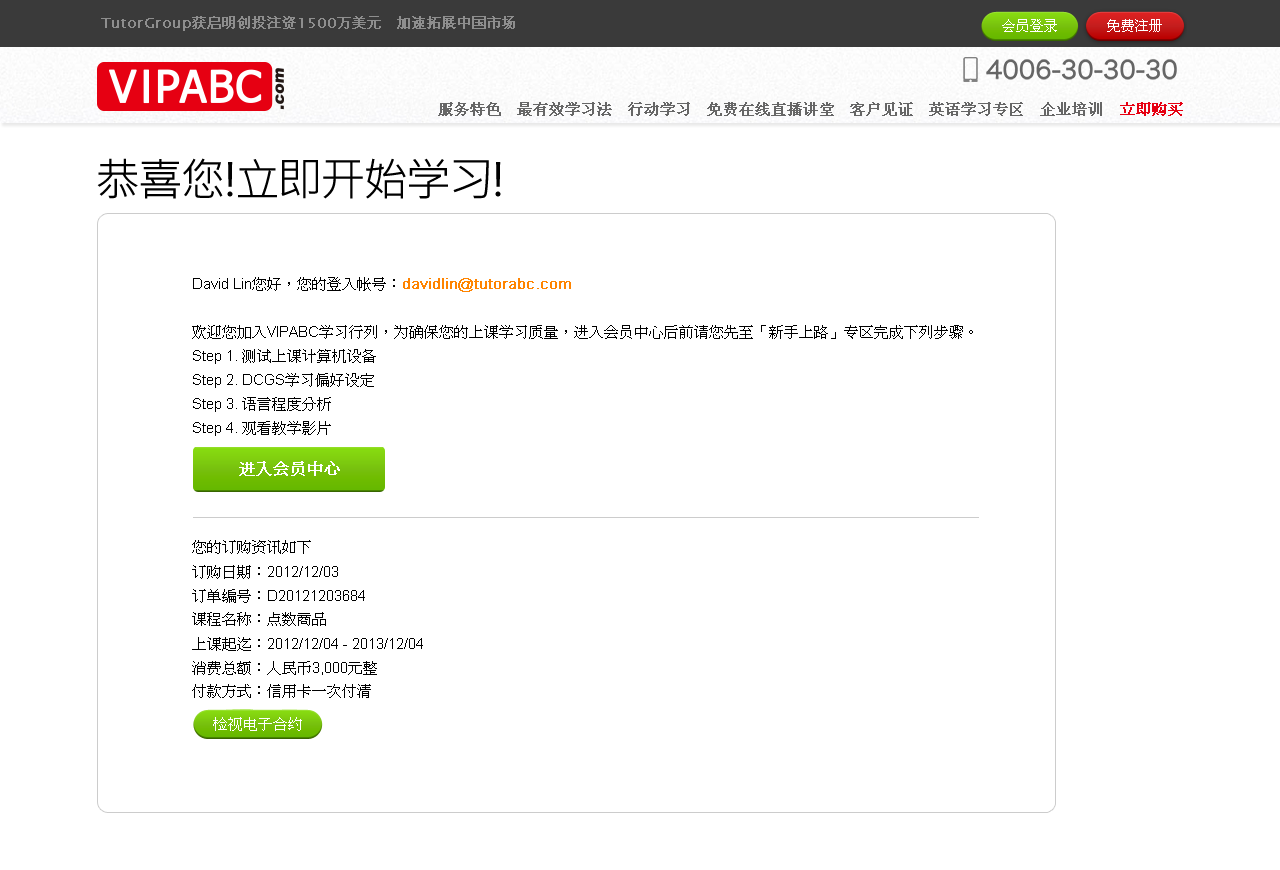
<style>
.page{position:relative;width:1280px;height:870px;background:#ffffff}
.page>*{position:absolute;margin:0}
.t1{font:45px "MicrosoftJhengHeiRegular";letter-spacing:-0.05em;color:#000000}
.t2{font:15px/24px "PMingLiU";color:#000000}
.t3{font:15px/24px "ArialMT";color:#000000}
.t4{font:15px/24px "ArialMT";color:#ff8400;font-weight:bold}
.t5{font:16px "PMingLiU";color:#ffffff;font-weight:bold}
.t6{font:15px "PMingLiU";color:#ffffff}
</style>
<div class="page">
<p class="t1" style="left:97px;top:158px;width:404px;height:41px">恭喜您!立即开始学习!</p>
<p class="t2" style="left:192px;top:277px;width:781px;height:421px"><span class="t3">David Lin</span>您好，您的登入帐号：<span class="t4">davidlin@tutorabc.com<br><br></span>欢迎您加入<span class="t3">VIPABC</span>学习行列，为确保您的上课学习质量，进入会员中心后前请您先至「新手上路」专区完成下列步骤。<span class="t3"><br>Step 1. </span>测试上课计算机设备<span class="t3"><br>Step 2. DCGS</span>学习偏好设定<span class="t3"><br>Step 3. </span>语言程度分析<span class="t3"><br>Step 4. </span>观看教学影片<br><br><br><br><br>您的订购资讯如下<br>订购日期：<span class="t3">2012/12/03<br></span>订单编号：<span class="t3">D20121203684<br></span>课程名称：点数商品<br>上课起迄：<span class="t3">2012/12/04 - 2013/12/04<br></span>消费总额：人民币<span class="t3">3,000</span>元整<br>付款方式：信用卡一次付清</p>
<p class="t5" style="left:239px;top:461px;width:101px;height:15px">进入会员中心</p>
<p class="t6" style="left:213px;top:717px;width:89px;height:14px">检视电子合约</p>
</div>
